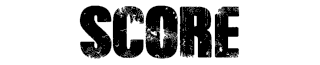
<style>
.page{position:relative;width:320px;height:65px;background:#ffffff}
.page>*{position:absolute;margin:0}
.t1{font:61px "Broken-Detroit";color:#000000}
</style>
<div class="page">
<p class="t1" style="left:79px;top:5px;width:161px;height:54px">SCORE</p>
</div>
